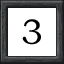
<style>
.page{position:relative;width:64px;height:64px;background:#ffffff}
.page>*{position:absolute;margin:0}
.t1{font:36px "BookmanOldStyle";color:#000000}
</style>
<div class="page">
<p class="t1" style="left:22px;top:19px;width:19px;height:26px">3</p>
</div>
